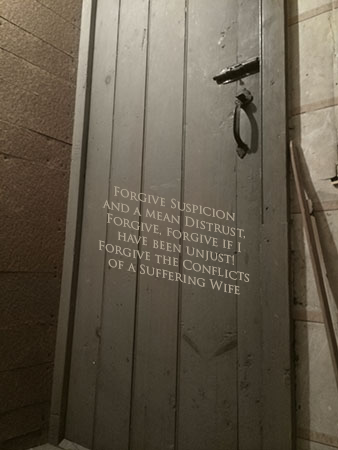
<style>
.page{position:relative;width:338px;height:450px}
.page>*{position:absolute;margin:0}
.t1{font:12px "TrajanPro-Regular";color:#ada290}
</style>
<div class="page">
<p class="t1" style="left:98px;top:186px;width:152px;height:109px;text-align:center;rotate:12deg">Forgive Suspicion <br>and a mean Distrust,<br>Forgive, forgive if I<br> have been unjust!<br>Forgive the Conflicts <br>of a Suffering Wife</p>
</div>
